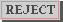
<style>
.page{position:relative;width:63px;height:22px;background:#cfcece}
.page>*{position:absolute;margin:0}
.t1{font:14px "NuevaStd-Bold";color:#4b4b4b}
</style>
<div class="page">
<p class="t1" style="left:6px;top:5px;width:8px;height:9px">R</p>
<p class="t1" style="left:15px;top:5px;width:15px;height:9px">EJ</p>
<p class="t1" style="left:31px;top:5px;width:15px;height:9px">EC</p>
<p class="t1" style="left:47px;top:5px;width:8px;height:9px">T</p>
</div>
